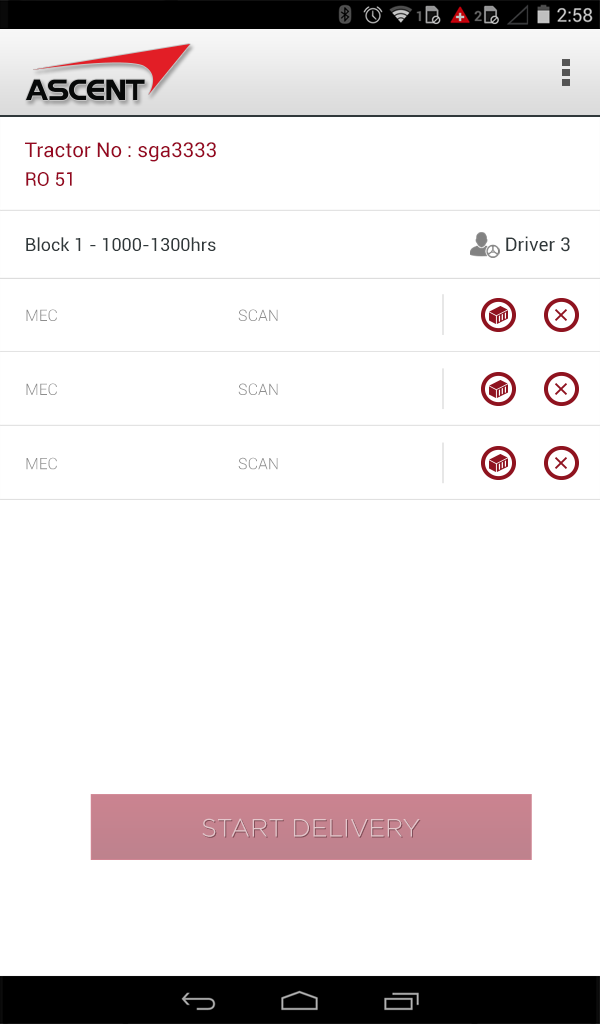
<style>
.page{position:relative;width:600px;height:1024px;background:#ffffff}
.page>*{position:absolute;margin:0}
.t1{font:20.4px "Roboto-Regular";color:#960721}
.t2{font:19px "Roboto-Regular";color:#960721}
.t3{font:18px "Roboto-Regular";color:#30383a}
.t4{font:19px "Roboto-Regular";color:#30383a}
.t5{font:15.8px "Roboto-Light";color:#8e8e8e}
.t6{font:25.1px "Gotham-Light";color:#e3c7cc}
</style>
<div class="page">
<p class="t1" style="left:25px;top:142px;width:191px;height:20px">Tractor No : sga3333</p>
<p class="t2" style="left:26px;top:172px;width:46px;height:14px">RO 51</p>
<p class="t3" style="left:26px;top:237px;width:190px;height:14px">Block 1 - 1000-1300hrs</p>
<p class="t4" style="left:506px;top:236px;width:64px;height:16px">Driver 3</p>
<p class="t5" style="left:26px;top:309px;width:31px;height:12px">MEC</p>
<p class="t5" style="left:238px;top:309px;width:40px;height:12px">SCAN</p>
<p class="t5" style="left:26px;top:383px;width:31px;height:12px">MEC</p>
<p class="t5" style="left:238px;top:383px;width:40px;height:12px">SCAN</p>
<p class="t5" style="left:26px;top:457px;width:31px;height:13px">MEC</p>
<p class="t5" style="left:238px;top:457px;width:40px;height:13px">SCAN</p>
<p class="t6" style="left:202px;top:818px;width:218px;height:19px">START DELIVERY</p>
</div>
